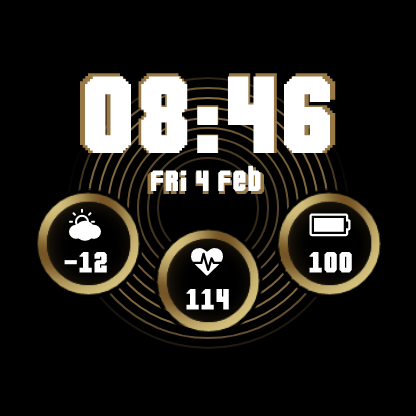
<style>
.page{position:relative;width:416px;height:416px;background:#000000}
.page>*{position:absolute;margin:0}
.t1{font:34px "Pixeldown";color:#ffffff}
.t2{font:125px "Pixeldown";color:#ffffff}
.t3{font:32px "Pixeldown";color:#ffffff}
.t4{font:120px "Pixeldown";color:#ffffff}
.t5{font:32px "custom_watch";color:#ffffff}
</style>
<div class="page">
<p class="t1" style="left:80px;top:73px;width:256px;height:121px;text-align:center"><span class="t2">08:46<br></span>Fri 4 feb</p>
<p class="t3" style="left:85px;top:76px;width:246px;height:115px;text-align:center"><span class="t4">08:46<br></span>Fri 4 feb</p>
<p class="t5" style="left:64px;top:208px;width:43px;height:65px;text-align:center">(<br>-12</p>
<p class="t5" style="left:309px;top:213px;width:43px;height:60px;text-align:center">F<br>100</p>
<p class="t5" style="left:186px;top:248px;width:43px;height:62px;text-align:center">A<br>114</p>
</div>
